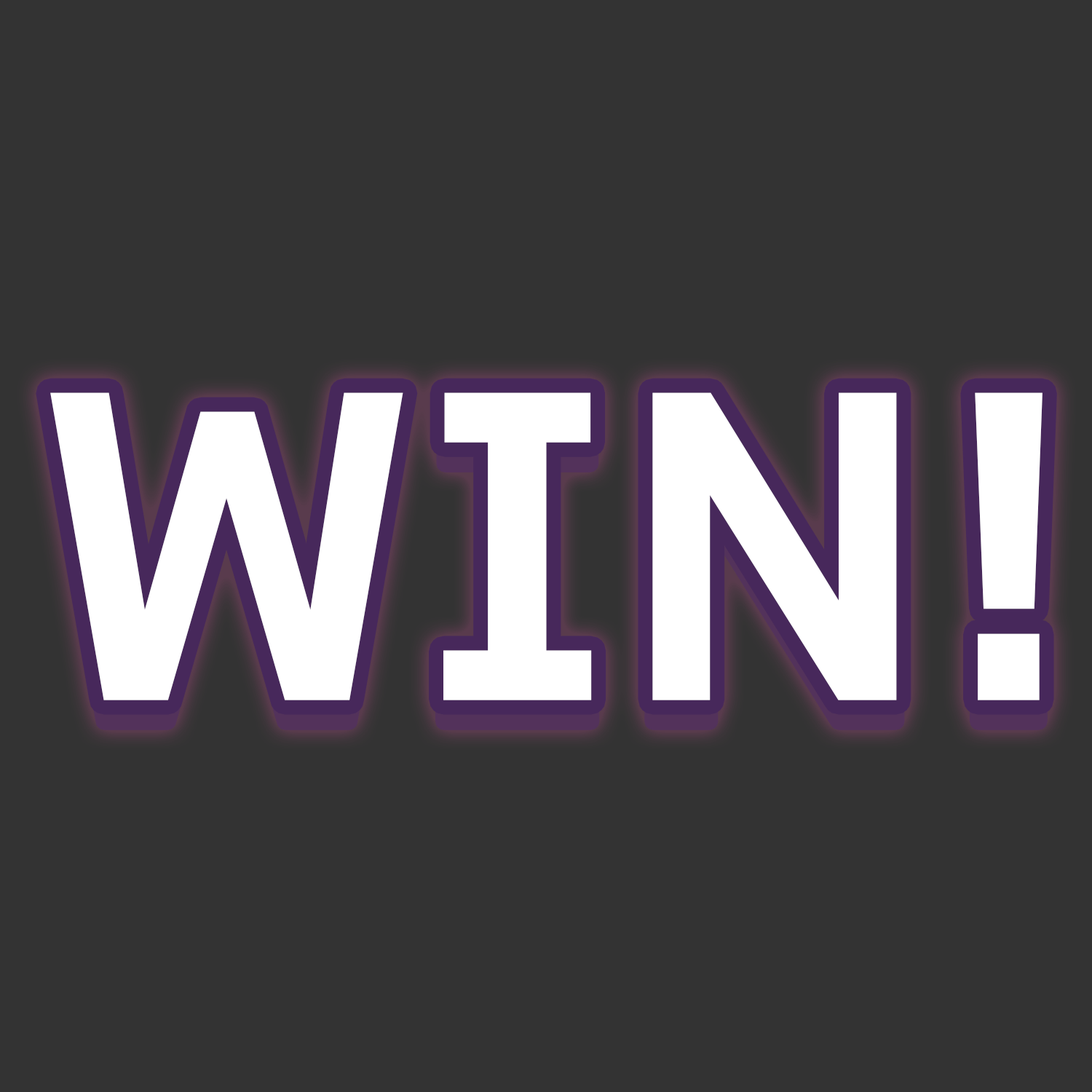
<style>
.page{position:relative;width:1092px;height:1092px;background:#333333}
.page>*{position:absolute;margin:0}
.t1{font:386.9px "NitalagoRuika-06";color:#ffffff}
</style>
<div class="page">
<p class="t1" style="left:50px;top:392px;width:992px;height:308px">WIN!</p>
</div>
